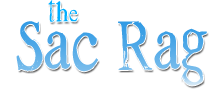
<style>
.page{position:relative;width:220px;height:90px;background:#ffffff}
.page>*{position:absolute;margin:0}
.t1{font:27.6px "Westsac";color:#00aeff;scale:0.9 1}
.t2{font:80px "Westsac";scale:0.8 1}
</style>
<div class="page">
<p class="t1" style="left:48px;top:0px;width:30px;height:22px">the</p>
<p class="t2" style="left:16px;top:21px;width:191px;height:65px">Sac Rag</p>
</div>
